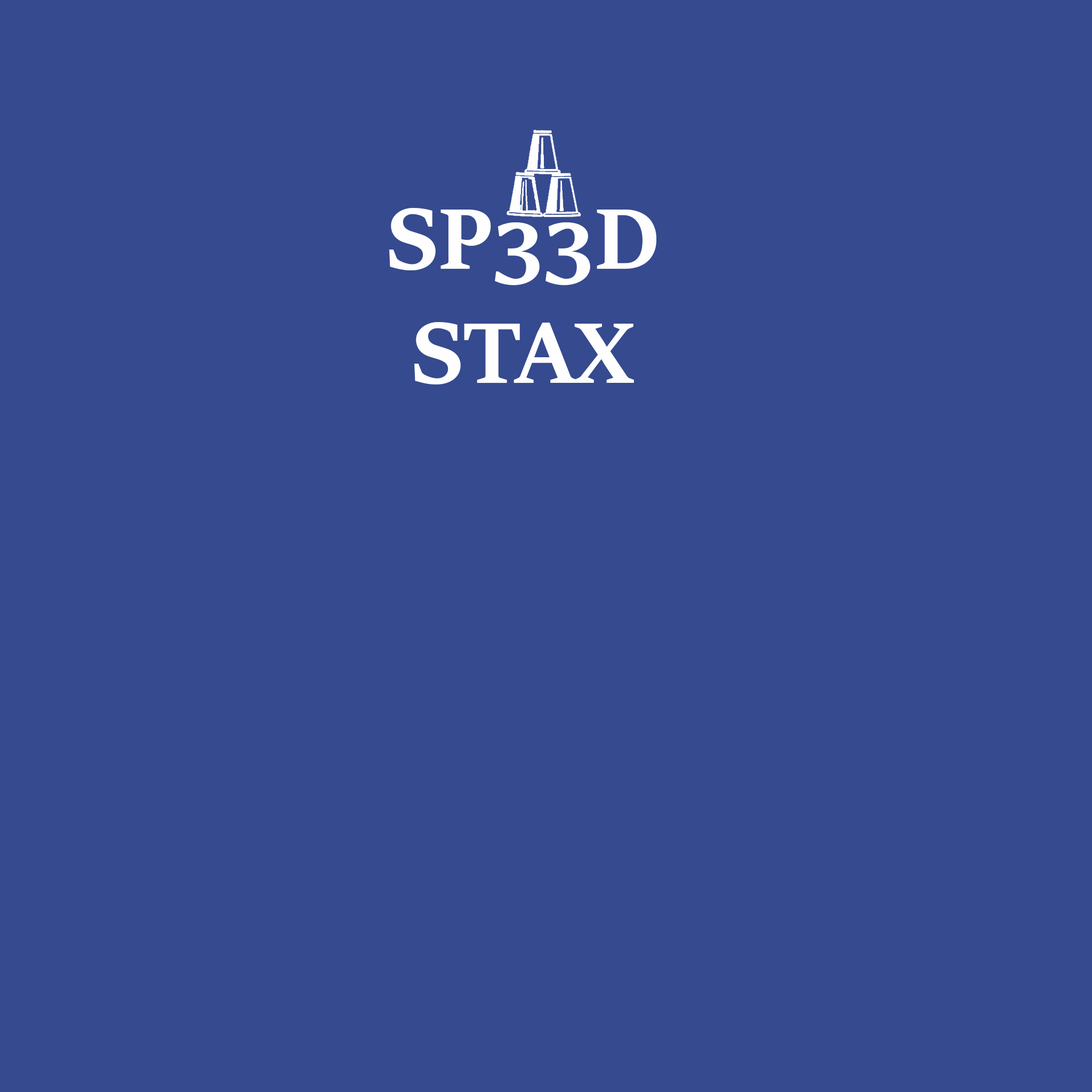
<style>
.page{position:relative;width:1092px;height:1092px;background:#354a8f}
.page>*{position:absolute;margin:0}
.t1{font:95.4px "SitkaHeading-Bold";color:#fefefe}
</style>
<div class="page">
<p class="t1" style="left:389px;top:208px;width:267px;height:176px;text-align:center">SP33D<br>STAX</p>
</div>
